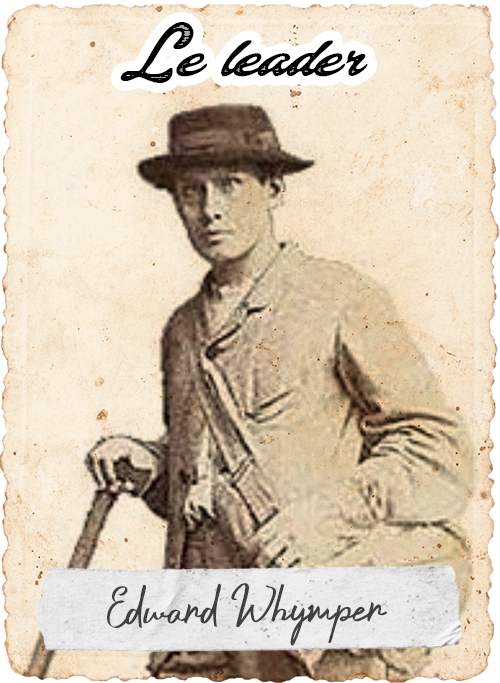
<style>
.page{position:relative;width:500px;height:683px}
.page>*{position:absolute;margin:0}
.t1{font:54.2px "ColinasPersonalUse-Regular";color:#000000}
.t2{font:54.2px "CrustaceansSignatureDEMO-Reg";color:#404040}
</style>
<div class="page">
<p class="t1" style="left:120px;top:22px;width:248px;height:61px">Le leader</p>
<p class="t2" style="left:107px;top:583px;width:281px;height:63px;rotate:-1deg">Edward Whymper</p>
</div>
